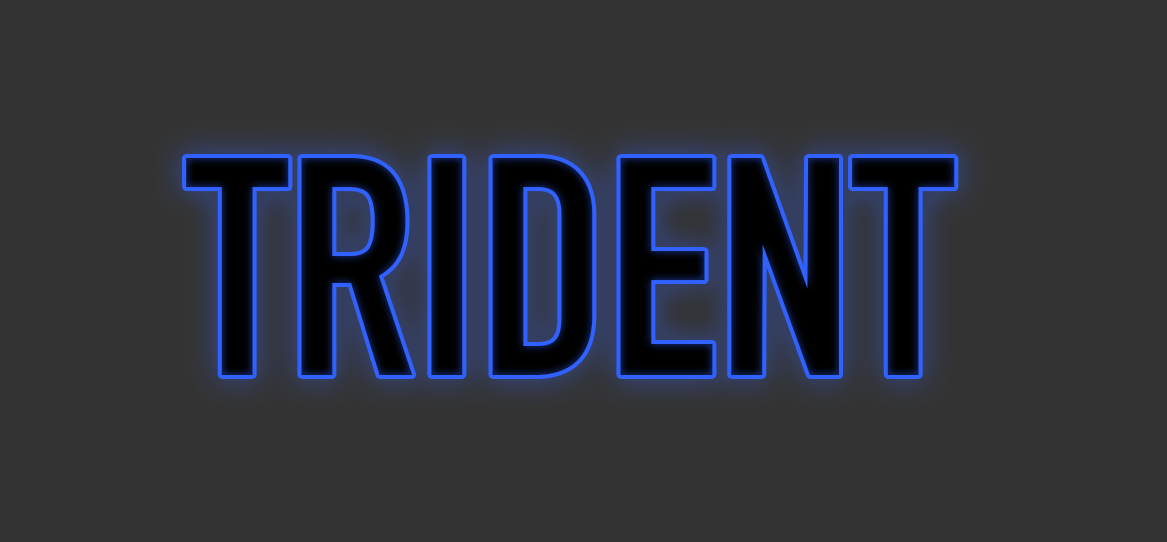
<style>
.page{position:relative;width:1167px;height:542px;background:#333333}
.page>*{position:absolute;margin:0}
.t1{font:302.5px "DINEngschrift";color:#010204}
</style>
<div class="page">
<p class="t1" style="left:186px;top:158px;width:769px;height:217px">TRIDENT</p>
</div>
